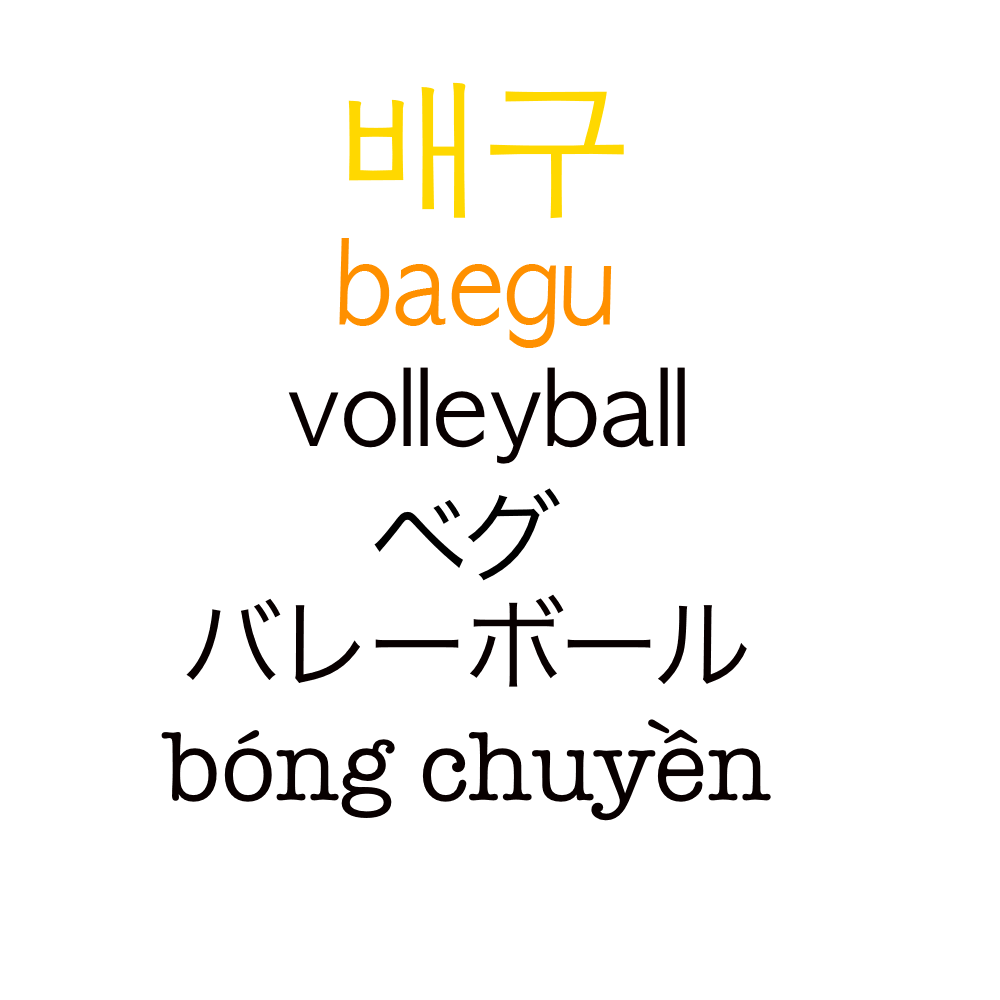
<style>
.page{position:relative;width:1000px;height:1000px;background:#ffffff}
.page>*{position:absolute;margin:0}
.t1{font:150px "AppleGothic";color:#ffd800}
.t2{font:111.2px "AppleGothic";color:#ff9000;scale:0.9 1}
.t3{font:100px "AppleGothic";color:#080000}
.t4{font:100px "HiraKakuProN-W3";color:#000000}
.t5{font:100px "HiraKakuProN-W3";color:#080000}
.t6{font:100px "AmericanTypewriter";color:#080000}
</style>
<div class="page">
<p class="t1" style="left:348px;top:82px;width:276px;height:137px">배구</p>
<p class="t2" style="left:339px;top:238px;width:273px;height:110px">baegu</p>
<p class="t3" style="left:288px;top:367px;width:397px;height:97px">volleyball</p>
<p class="t4" style="left:374px;top:488px;width:186px;height:93px">ベグ</p>
<p class="t5" style="left:186px;top:594px;width:561px;height:93px">バレーボール</p>
<p class="t6" style="left:161px;top:719px;width:610px;height:102px">bóng chuyền</p>
</div>
